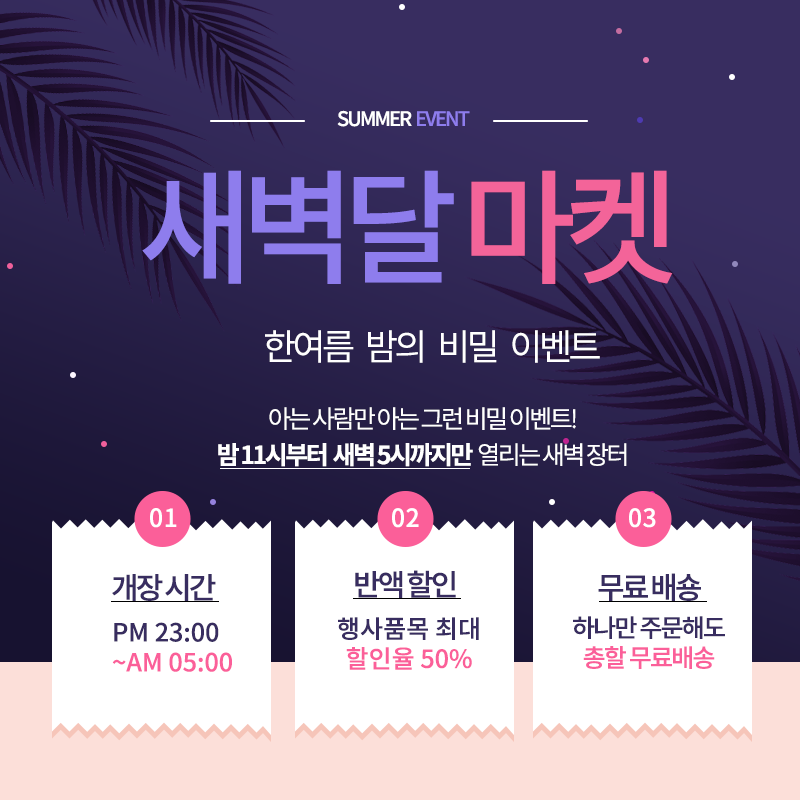
<style>
.page{position:relative;width:800px;height:800px}
.page>*{position:absolute;margin:0}
.t1{font:20px "NotoSansCJKkr-Medium";letter-spacing:-0.1em;color:#ffffff}
.t2{font:20px "NotoSansCJKkr-Medium";letter-spacing:-0.1em;color:#8e7ded}
.t3{font:125.1px "NotoSansCJKkr-Medium";letter-spacing:-0.1em;color:#8e7ded}
.t4{font:125.1px "NotoSansCJKkr-Medium";letter-spacing:-0.1em;color:#f36499}
.t5{font:36px "NotoSansCJKkr-DemiLight";letter-spacing:-0.1em;color:#ffffff}
.t6{font:25px/36px "NotoSansCJKkr-DemiLight";letter-spacing:-0.1em;color:#ffffff}
.t7{font:25px/36px "NotoSansCJKkr-Bold";letter-spacing:-0.1em;color:#ffffff}
.t8{font:25px "NotoSansCJKkr-Medium";letter-spacing:-0.1em;color:#ffffff}
.t9{font:24.9px "NotoSansCJKkr-Medium";letter-spacing:-0.1em;color:#ffffff}
.t10{font:29.6px "NotoSansCJKkr-Medium";letter-spacing:-0.1em;color:#382d60}
.t11{font:29.7px "NotoSansCJKkr-Medium";letter-spacing:-0.1em;color:#382d60}
.t12{font:30px "NotoSansCJKkr-Medium";letter-spacing:-0.1em;color:#382d60}
.t13{font:24.9px/29.9px "NotoSansCJKkr-Medium";letter-spacing:-0.001em;color:#382d60}
.t14{font:24.9px/29.9px "NotoSansCJKkr-Medium";letter-spacing:-0.001em;color:#fb5f99}
.t15{font:24.9px "NotoSansCJKkr-Medium";letter-spacing:-0.075em;color:#382d60}
.t16{font:24.9px "NotoSansCJKkr-Medium";letter-spacing:-0.075em;color:#fb5f99}
</style>
<div class="page">
<p class="t1" style="left:337px;top:110px;width:133px;height:17px">SUMMER  <span class="t2">EVENT</span></p>
<p class="t3" style="left:142px;top:170px;width:531px;height:114px">새벽달 <span class="t4">마켓</span></p>
<p class="t5" style="left:265px;top:330px;width:335px;height:33px">한여름   밤의   비밀   이벤트</p>
<p class="t6" style="left:218px;top:407px;width:409px;height:60px;text-align:center">아는 사람만 아는 그런 비밀 이벤트!<br><span class="t7">밤 11시부터  새벽 5시까지만 </span> 열리는 새벽 장터</p>
<p class="t8" style="left:150px;top:508px;width:27px;height:20px">0 1</p>
<p class="t9" style="left:392px;top:508px;width:27px;height:20px">0 2</p>
<p class="t9" style="left:629px;top:508px;width:27px;height:20px">0 3</p>
<p class="t10" style="left:112px;top:574px;width:104px;height:27px">개장 시간</p>
<p class="t11" style="left:355px;top:570px;width:101px;height:28px">반액 할인</p>
<p class="t12" style="left:598px;top:573px;width:103px;height:28px">무료 배숑</p>
<p class="t13" style="left:338px;top:617px;width:141px;height:53px;text-align:center">행사품목 최대<br><span class="t14">할인율 50%</span></p>
<p class="t15" style="left:573px;top:616px;width:152px;height:53px;text-align:center">하나만 주문해도<br><span class="t16">총할 무료배송</span></p>
<p class="t14" style="left:112px;top:622px;width:120px;height:50px"><span class="t13">PM 23:00<br></span>~AM 05:00</p>
</div>
